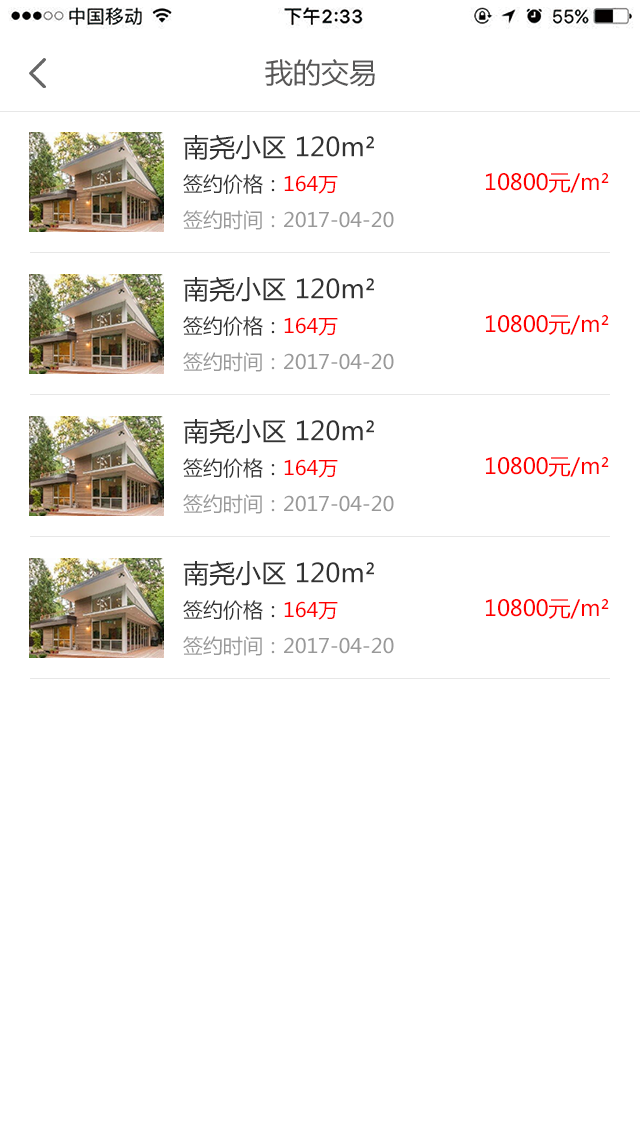
<style>
.page{position:relative;width:640px;height:1136px;background:#ffffff}
.page>*{position:absolute;margin:0}
.t1{font:28px "MicrosoftYaHei";color:#585757}
.t2{font:26px "MicrosoftYaHei";color:#333333}
.t3{font:20px "MicrosoftYaHei";color:#333333}
.t4{font:20px "MicrosoftYaHei";color:#ff0000}
.t5{font:22px "MicrosoftYaHei";color:#ff0000}
.t6{font:20px "MicrosoftYaHei";color:#999999}
</style>
<div class="page">
<p class="t1" style="left:265px;top:59px;width:110px;height:28px">我的交易</p>
<p class="t2" style="left:183px;top:134px;width:191px;height:26px">南尧小区 120m²</p>
<p class="t3" style="left:183px;top:174px;width:155px;height:20px">签约价格：<span class="t4">164万</span></p>
<p class="t5" style="left:486px;top:173px;width:123px;height:20px">10800元/m²</p>
<p class="t6" style="left:183px;top:210px;width:211px;height:20px">签约时间：2017-04-20</p>
<p class="t2" style="left:183px;top:276px;width:191px;height:26px">南尧小区 120m²</p>
<p class="t3" style="left:183px;top:316px;width:155px;height:20px">签约价格：<span class="t4">164万</span></p>
<p class="t5" style="left:486px;top:315px;width:123px;height:20px">10800元/m²</p>
<p class="t6" style="left:183px;top:352px;width:211px;height:20px">签约时间：2017-04-20</p>
<p class="t2" style="left:183px;top:418px;width:191px;height:26px">南尧小区 120m²</p>
<p class="t3" style="left:183px;top:458px;width:155px;height:20px">签约价格：<span class="t4">164万</span></p>
<p class="t5" style="left:486px;top:457px;width:123px;height:20px">10800元/m²</p>
<p class="t6" style="left:183px;top:494px;width:211px;height:20px">签约时间：2017-04-20</p>
<p class="t2" style="left:183px;top:560px;width:191px;height:26px">南尧小区 120m²</p>
<p class="t3" style="left:183px;top:600px;width:155px;height:20px">签约价格：<span class="t4">164万</span></p>
<p class="t5" style="left:486px;top:599px;width:123px;height:20px">10800元/m²</p>
<p class="t6" style="left:183px;top:636px;width:211px;height:20px">签约时间：2017-04-20</p>
</div>
